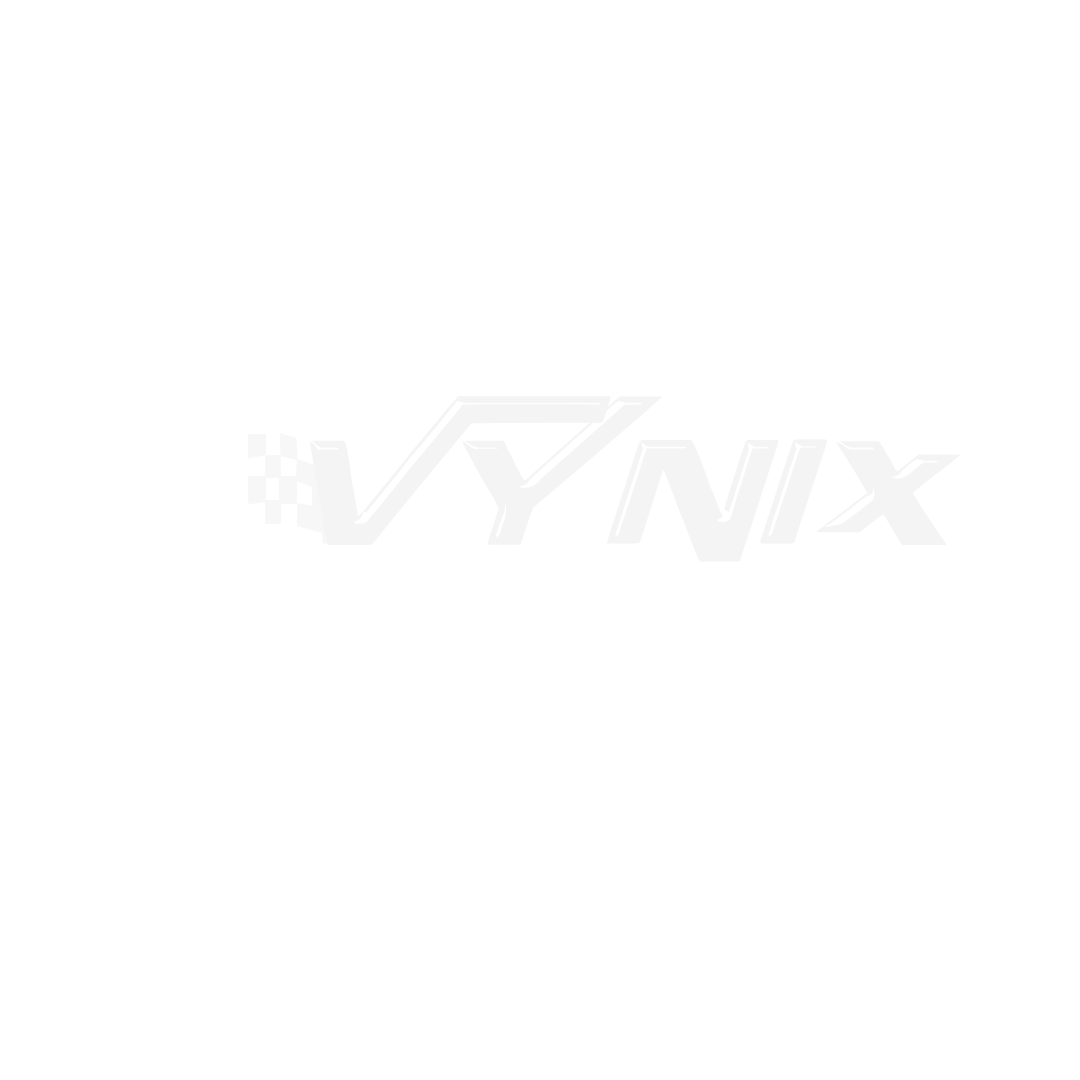
<style>
.page{position:relative;width:1080px;height:1080px;background:#ffffff}
.page>*{position:absolute;margin:0}
.t1{font:108.7px "OverThere";color:#f4f4f4}
</style>
<div class="page">
<p class="t1" style="left:309px;top:396px;width:651px;height:166px">VYNIX</p>
</div>
